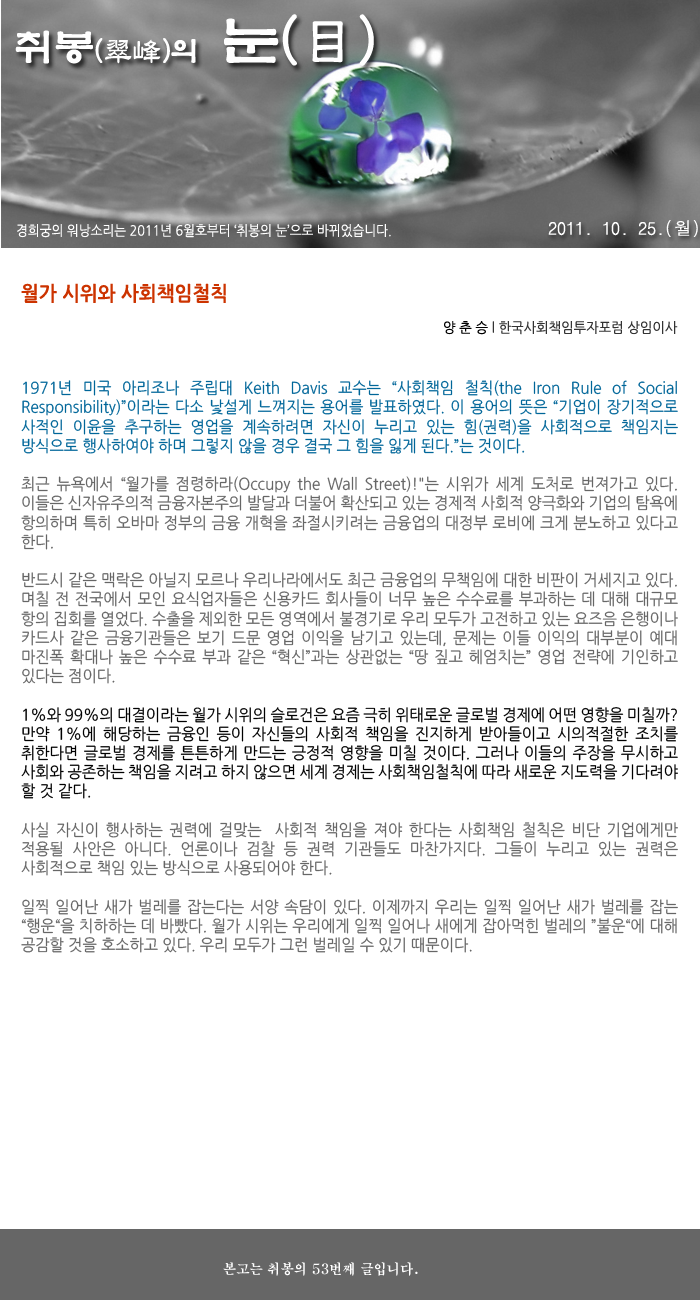
<style>
.page{position:relative;width:700px;height:1300px;background:#ffffff}
.page>*{position:absolute;margin:0}
.t1{font:28.6px "YetR-HM";color:#ffffff}
.t2{font:39.6px "YetR-HM";color:#ffffff}
.t3{font:57.3px "YetR-HM";color:#ffffff}
.t4{font:18px "DotumChe";color:#ffffff}
.t5{font:14px "NanumGothic";color:#ffffff;scale:0.9 1}
.t6{font:20px "NanumGothicBold";color:#cc3300;scale:0.95 1}
.t7{font:14px "NanumGothic";color:#333333;scale:0.95 1}
.t8{font:14px "NanumGothic";color:#000000;scale:0.95 1}
.t9{font:16px "NanumGothic";color:#666666;scale:0.95 1}
.t10{font:16px "NanumGothic";color:#006699;scale:0.95 1}
.t11{font:16px "NanumGothic";color:#000000;scale:0.95 1}
.t12{font:14px "H2mjrE";color:#ffffff;scale:0.95 1}
</style>
<div class="page">
<p class="t1" style="left:15px;top:14px;width:359px;height:52px"><span class="t2">취봉</span>(翠峰)의  <span class="t3">눈(目)</span></p>
<p class="t4" style="left:548px;top:220px;width:150px;height:17px">2011. 10. 25.(월)</p>
<p class="t5" style="left:17px;top:224px;width:374px;height:14px">경희궁의 워낭소리는 2011년 6월호부터 ‘취봉의 눈’으로 바뀌었습니다.</p>
<p class="t6" style="left:21px;top:283px;width:205px;height:20px">월가 시위와 사회책임철칙</p>
<p class="t7" style="left:444px;top:321px;width:234px;height:14px"><span class="t8">양 춘 승 </span>l 한국사회책임투자포럼 상임이사</p>
<p class="t9" style="left:21px;top:380px;width:657px;height:573px;text-align:justify"><span class="t10">1971년 미국 아리조나 주립대 Keith Davis 교수는 “사회책임 철칙(the Iron Rule of Social Responsibility)”이라는 다소 낯설게 느껴지는 용어를 발표하였다. 이 용어의 뜻은 “기업이 장기적으로 사적인 이윤을 추구하는 영업을 계속하려면 자신이 누리고 있는 힘(권력)을 사회적으로 책임지는 방식으로 행사하여야 하며 그렇지 않을 경우 결국 그 힘을 잃게 된다.”는 것이다.<br></span><br>최근 뉴욕에서 “월가를 점령하라(Occupy the Wall Street)!"는 시위가 세계 도처로 번져가고 있다. 이들은 신자유주의적 금융자본주의 발달과 더불어 확산되고 있는 경제적 사회적 양극화와 기업의 탐욕에 항의하며 특히 오바마 정부의 금융 개혁을 좌절시키려는 금융업의 대정부 로비에 크게 분노하고 있다고 한다.<br><br>반드시 같은 맥락은 아닐지 모르나 우리나라에서도 최근 금융업의 무책임에 대한 비판이 거세지고 있다. 며칠 전 전국에서 모인 요식업자들은 신용카드 회사들이 너무 높은 수수료를 부과하는 데 대해 대규모 항의 집회를 열었다. 수출을 제외한 모든 영역에서 불경기로 우리 모두가 고전하고 있는 요즈음 은행이나 카드사 같은 금융기관들은 보기 드문 영업 이익을 남기고 있는데, 문제는 이들 이익의 대부분이 예대 마진폭 확대나 높은 수수료 부과 같은 “혁신”과는 상관없는 “땅 짚고 헤엄치는” 영업 전략에 기인하고 있다는 점이다.<br><br><span class="t11">1%와 99%의 대결이라는 월가 시위의 슬로건은 요즘 극히 위태로운 글로벌 경제에 어떤 영향을 미칠까? 만약 1%에 해당하는 금융인 등이 자신들의 사회적 책임을 진지하게 받아들이고 시의적절한 조치를 취한다면 글로벌 경제를 튼튼하게 만드는 긍정적 영향을 미칠 것이다. 그러나 이들의 주장을 무시하고 사회와 공존하는 책임을 지려고 하지 않으면 세계 경제는 사회책임철칙에 따라 새로운 지도력을 기다려야 할 것 같다.<br></span><br>사실 자신이 행사하는 권력에 걸맞는  사회적 책임을 져야 한다는 사회책임 철칙은 비단 기업에게만 적용될 사안은 아니다. 언론이나 검찰 등 권력 기관들도 마찬가지다. 그들이 누리고 있는 권력은 사회적으로 책임 있는 방식으로 사용되어야 한다. <br><br>일찍 일어난 새가 벌레를 잡는다는 서양 속담이 있다. 이제까지 우리는 일찍 일어난 새가 벌레를 잡는 “행운“을 치하하는 데 바빴다. 월가 시위는 우리에게 일찍 일어나 새에게 잡아먹힌 벌레의 ”불운“에 대해 공감할 것을 호소하고 있다. 우리 모두가 그런 벌레일 수 있기 때문이다.</p>
<p class="t12" style="left:223px;top:1262px;width:195px;height:14px">본고는 취봉의 53번째 글입니다.</p>
</div>
